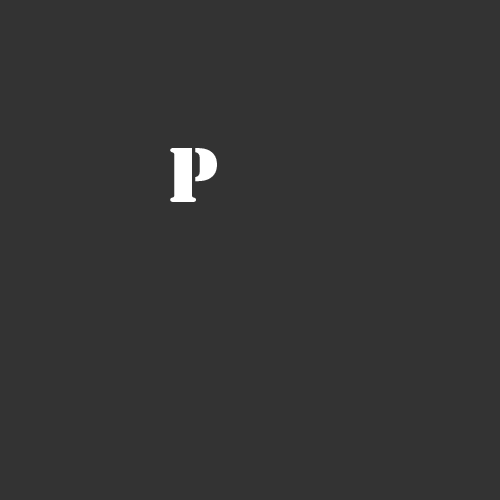
<style>
.page{position:relative;width:500px;height:500px;background:#333333}
.page>*{position:absolute;margin:0}
.t1{font:72px "StencilStd";color:#ffffff}
</style>
<div class="page">
<p class="t1" style="left:170px;top:148px;width:47px;height:54px">P</p>
</div>
